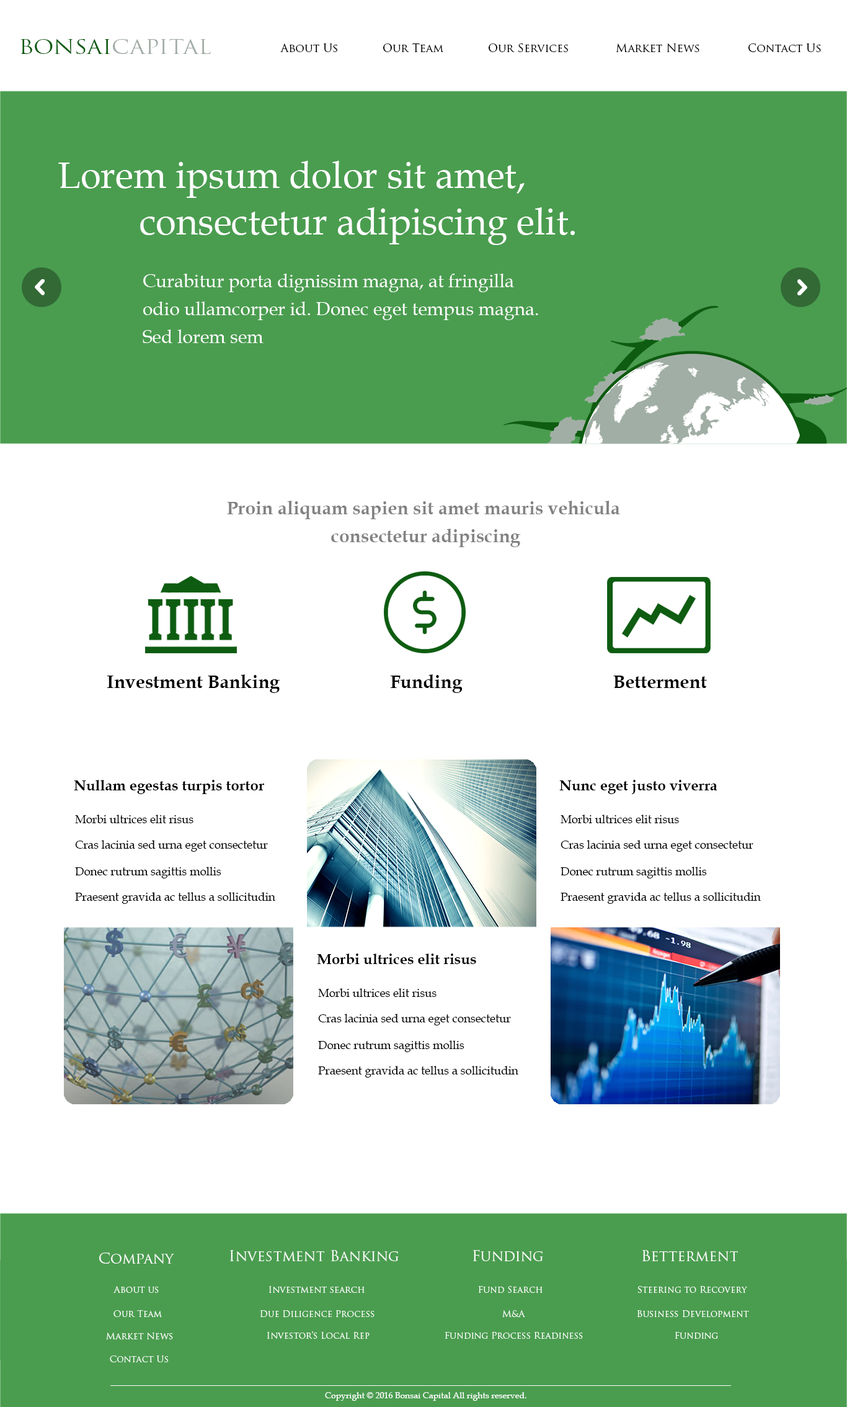
<style>
.page{position:relative;width:847px;height:1407px;background:#ffffff}
.page>*{position:absolute;margin:0}
.t1{font:19.2px "TrajanPro-Regular";color:#a2ada5;scale:1.15 1}
.t2{font:19.2px "TrajanPro-Regular";color:#0e5c11;scale:1.15 1}
.t3{font:11.3px "TrajanPro-Regular";color:#000000}
.t4{font:37.2px/9.3px "BookAntiqua";color:#ffffff}
.t5{font:18.6px/9.3px "BookAntiqua";color:#ffffff}
.t6{font:18.6px/9.3px "BookAntiqua-Bold";color:#828282}
.t7{font:18.6px "BookAntiqua-Bold";color:#000000}
.t8{font:14.9px "BookAntiqua-Bold";color:#000000}
.t9{font:11.5px "BookAntiqua";color:#000000}
.t10{font:14.9px "TrajanPro-Regular";color:#ffffff}
.t11{font:9.1px "TrajanPro-Regular";color:#ffffff}
.t12{font:8.7px "BookAntiqua";color:#ffffff}
</style>
<div class="page">
<p class="t1" style="left:20px;top:39px;width:191px;height:15px"><span class="t2">BONSAI</span>CAPITAL</p>
<p class="t3" style="left:280px;top:43px;width:57px;height:9px">About Us</p>
<p class="t3" style="left:383px;top:43px;width:61px;height:9px">Our Team</p>
<p class="t3" style="left:489px;top:43px;width:79px;height:9px">Our Services</p>
<p class="t3" style="left:616px;top:43px;width:84px;height:9px">Market News</p>
<p class="t3" style="left:749px;top:43px;width:72px;height:9px">Contact Us</p>
<p class="t4" style="left:58px;top:161px;width:517px;height:84px;text-align:right">Lorem ipsum dolor sit amet, <br><br><br><br><br>      consectetur adipiscing elit.</p>
<p class="t5" style="left:143px;top:274px;width:396px;height:69px;text-align:right">Curabitur porta dignissim magna, at fringilla <br><br><br>odio ullamcorper id. Donec eget tempus magna. <br><br><br>Sed lorem sem</p>
<p class="t6" style="left:227px;top:501px;width:393px;height:46px;text-align:center">Proin aliquam sapien sit amet mauris vehicula<br><br><br> consectetur adipiscing</p>
<p class="t7" style="left:107px;top:674px;width:173px;height:19px">Investment Banking</p>
<p class="t7" style="left:391px;top:674px;width:72px;height:19px">Funding</p>
<p class="t7" style="left:614px;top:676px;width:93px;height:12px">Betterment</p>
<p class="t8" style="left:74px;top:780px;width:190px;height:14px">Nullam egestas turpis tortor</p>
<p class="t8" style="left:560px;top:780px;width:158px;height:14px">Nunc eget justo viverra</p>
<p class="t9" style="left:75px;top:815px;width:119px;height:8px">Morbi ultrices elit risus</p>
<p class="t9" style="left:561px;top:815px;width:118px;height:8px">Morbi ultrices elit risus</p>
<p class="t9" style="left:75px;top:840px;width:193px;height:12px">Cras lacinia sed urna eget consectetur</p>
<p class="t9" style="left:561px;top:840px;width:193px;height:12px">Cras lacinia sed urna eget consectetur</p>
<p class="t9" style="left:75px;top:867px;width:146px;height:11px">Donec rutrum sagittis mollis</p>
<p class="t9" style="left:561px;top:867px;width:146px;height:11px">Donec rutrum sagittis mollis</p>
<p class="t9" style="left:75px;top:892px;width:200px;height:12px">Praesent gravida ac tellus a sollicitudin</p>
<p class="t9" style="left:561px;top:892px;width:200px;height:12px">Praesent gravida ac tellus a sollicitudin</p>
<p class="t8" style="left:317px;top:954px;width:159px;height:10px">Morbi ultrices elit risus</p>
<p class="t9" style="left:318px;top:988px;width:119px;height:9px">Morbi ultrices elit risus</p>
<p class="t9" style="left:318px;top:1014px;width:193px;height:12px">Cras lacinia sed urna eget consectetur</p>
<p class="t9" style="left:318px;top:1040px;width:147px;height:12px">Donec rutrum sagittis mollis</p>
<p class="t9" style="left:318px;top:1066px;width:201px;height:12px">Praesent gravida ac tellus a sollicitudin</p>
<p class="t10" style="left:99px;top:1253px;width:75px;height:11px">Company</p>
<p class="t10" style="left:230px;top:1250px;width:169px;height:11px">Investment Banking</p>
<p class="t10" style="left:473px;top:1250px;width:70px;height:12px">Funding</p>
<p class="t10" style="left:643px;top:1250px;width:95px;height:11px">Betterment</p>
<p class="t11" style="left:114px;top:1286px;width:45px;height:7px">About us</p>
<p class="t11" style="left:269px;top:1286px;width:96px;height:7px">Investment search</p>
<p class="t11" style="left:478px;top:1286px;width:65px;height:7px">Fund Search</p>
<p class="t11" style="left:638px;top:1286px;width:110px;height:7px">Steering to Recovery</p>
<p class="t11" style="left:114px;top:1310px;width:48px;height:7px">Our Team</p>
<p class="t11" style="left:260px;top:1310px;width:115px;height:8px">Due Diligence Process</p>
<p class="t11" style="left:503px;top:1310px;width:22px;height:7px">M&amp;A</p>
<p class="t11" style="left:637px;top:1310px;width:112px;height:8px">Business Development</p>
<p class="t11" style="left:106px;top:1333px;width:67px;height:6px">Market News</p>
<p class="t11" style="left:267px;top:1331px;width:103px;height:8px">Investor’s Local Rep</p>
<p class="t11" style="left:445px;top:1332px;width:138px;height:7px">Funding Process Readiness</p>
<p class="t11" style="left:675px;top:1332px;width:43px;height:7px">Funding</p>
<p class="t11" style="left:110px;top:1356px;width:58px;height:6px">Contact Us</p>
<p class="t12" style="left:325px;top:1392px;width:202px;height:9px">Copyright © 2016 Bonsai Capital All rights reserved.</p>
</div>
